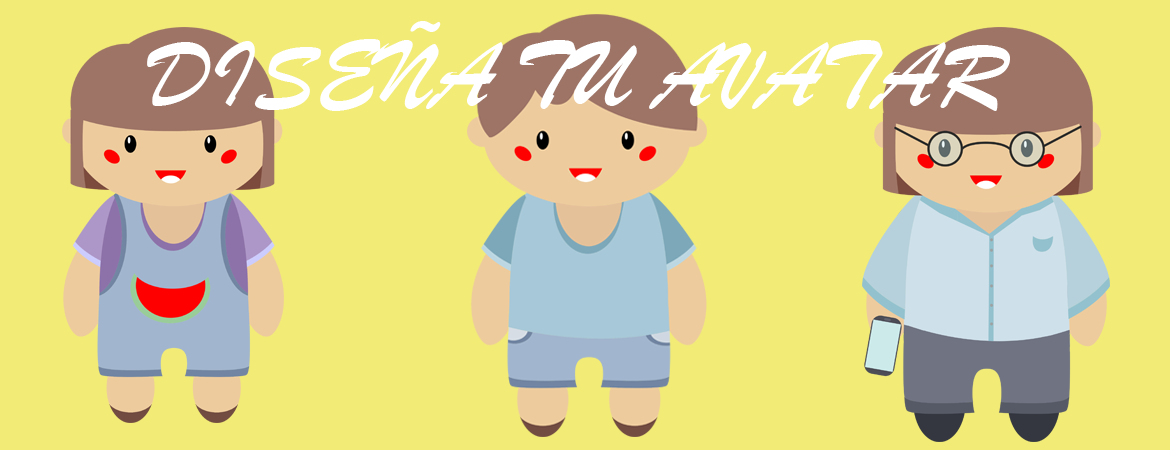
<style>
.page{position:relative;width:1170px;height:450px;background:#f2ec76}
.page>*{position:absolute;margin:0}
.t1{font:96.9px "BrushScriptMT";color:#ffffff}
</style>
<div class="page">
<p class="t1" style="left:147px;top:21px;width:863px;height:90px">DISEÑA TU AVATAR</p>
</div>
